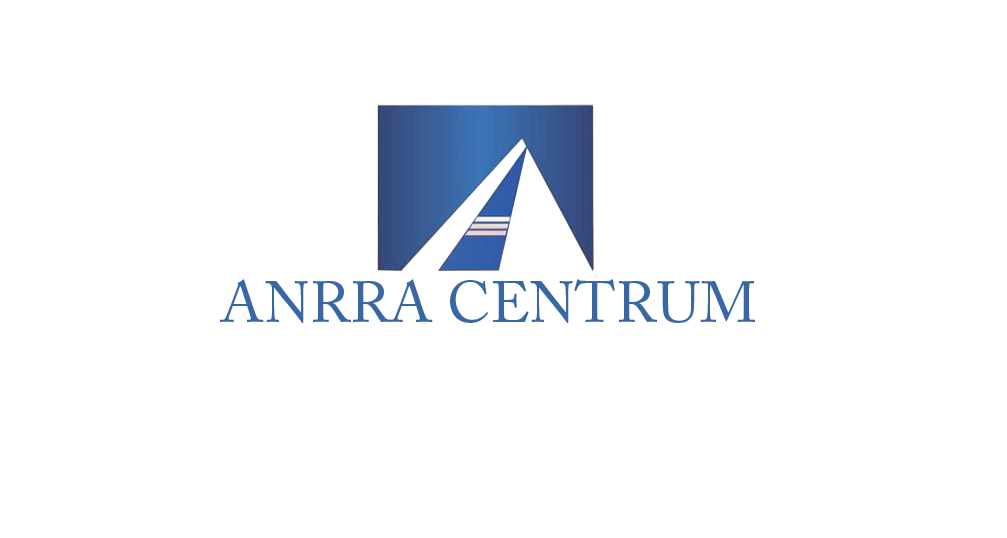
<style>
.page{position:relative;width:1007px;height:538px;background:#ffffff}
.page>*{position:absolute;margin:0}
.t1{font:58px "ACaslonPro-Regular";color:#3967a3}
</style>
<div class="page">
<p class="t1" style="left:220px;top:279px;width:535px;height:44px">ANRRA CENTRUM</p>
</div>
